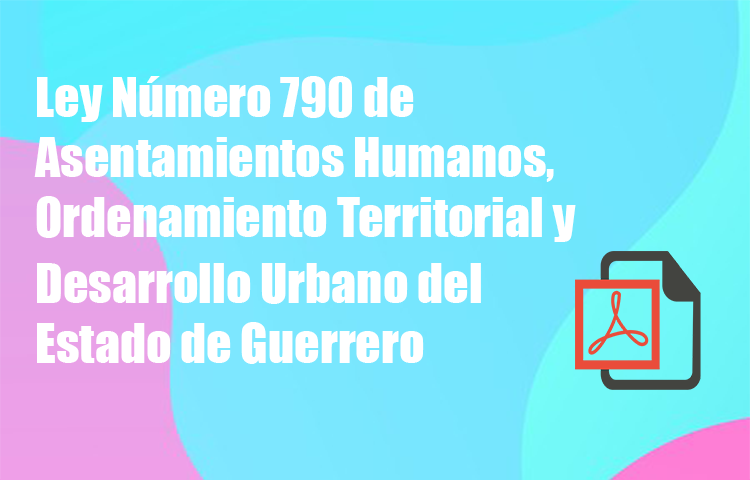
<style>
.page{position:relative;width:750px;height:480px}
.page>*{position:absolute;margin:0}
.t1{font:50px "Impact";color:#ffffff}
</style>
<div class="page">
<p class="t1" style="left:34px;top:76px;width:542px;height:166px">Ley Número 790 de Asentamientos Humanos, Ordenamiento Territorial y</p>
<p class="t1" style="left:37px;top:263px;width:444px;height:101px">Desarrollo Urbano del Estado de Guerrero</p>
</div>
